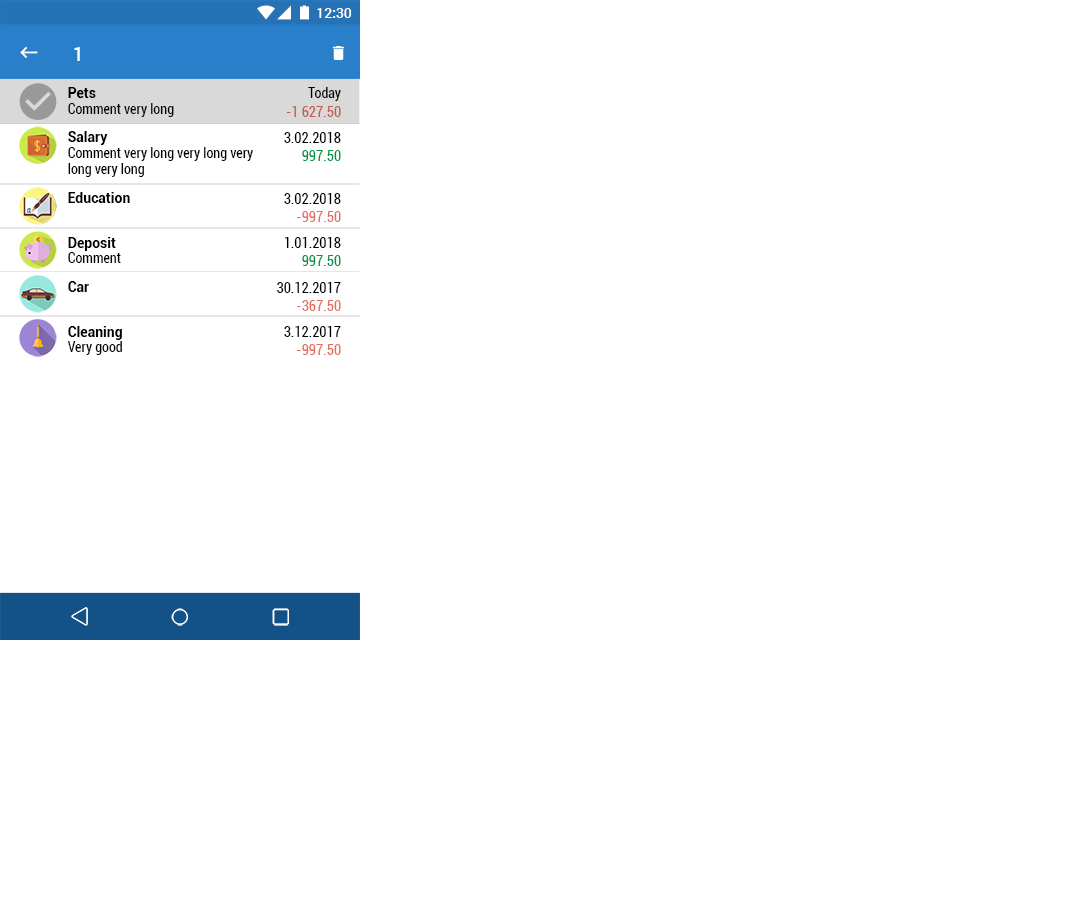
<style>
.page{position:relative;width:1080px;height:900px;background:#ffffff}
.page>*{position:absolute;margin:0}
.t1{font:14px "Roboto-Medium";color:#ffffff}
.t2{font:19.9px "Roboto-Medium";color:#ffffff}
.t3{font:14px "Roboto-Bold";color:#000000}
.t4{font:14px "Roboto-Condensed";color:#000000}
.t5{font:14px "Roboto-Condensed";color:#c15d51}
.t6{font:14px "Roboto-Condensed";color:#009245}
.t7{font:14px "Roboto-Condensed";color:#e36d5f}
</style>
<div class="page">
<p class="t1" style="left:317px;top:8px;width:35px;height:10px">12:30</p>
<p class="t2" style="left:74px;top:47px;width:6px;height:14px">1</p>
<p class="t3" style="left:68px;top:87px;width:28px;height:11px">Pets</p>
<p class="t4" style="left:308px;top:87px;width:33px;height:14px">Today</p>
<p class="t4" style="left:68px;top:103px;width:106px;height:14px">Comment very long</p>
<p class="t5" style="left:286px;top:106px;width:55px;height:11px">-1 627.50</p>
<p class="t3" style="left:68px;top:131px;width:40px;height:14px">Salary</p>
<p class="t4" style="left:284px;top:132px;width:57px;height:11px">3.02.2018</p>
<p class="t4" style="left:68px;top:147px;width:185px;height:30px">Comment very long very long very <br>long very long</p>
<p class="t6" style="left:302px;top:150px;width:39px;height:11px">997.50</p>
<p class="t3" style="left:68px;top:192px;width:62px;height:11px">Education</p>
<p class="t4" style="left:284px;top:193px;width:57px;height:11px">3.02.2018</p>
<p class="t7" style="left:297px;top:211px;width:44px;height:11px">-997.50</p>
<p class="t3" style="left:68px;top:237px;width:48px;height:14px">Deposit</p>
<p class="t4" style="left:285px;top:237px;width:56px;height:11px">1.01.2018</p>
<p class="t4" style="left:68px;top:252px;width:53px;height:11px">Comment</p>
<p class="t6" style="left:302px;top:255px;width:39px;height:11px">997.50</p>
<p class="t3" style="left:68px;top:281px;width:21px;height:11px">Car</p>
<p class="t4" style="left:277px;top:282px;width:64px;height:11px">30.12.2017</p>
<p class="t7" style="left:297px;top:300px;width:44px;height:11px">-367.50</p>
<p class="t3" style="left:68px;top:326px;width:54px;height:14px">Cleaning</p>
<p class="t4" style="left:284px;top:326px;width:57px;height:11px">3.12.2017</p>
<p class="t4" style="left:68px;top:341px;width:54px;height:14px">Very good</p>
<p class="t7" style="left:297px;top:344px;width:44px;height:11px">-997.50</p>
</div>
